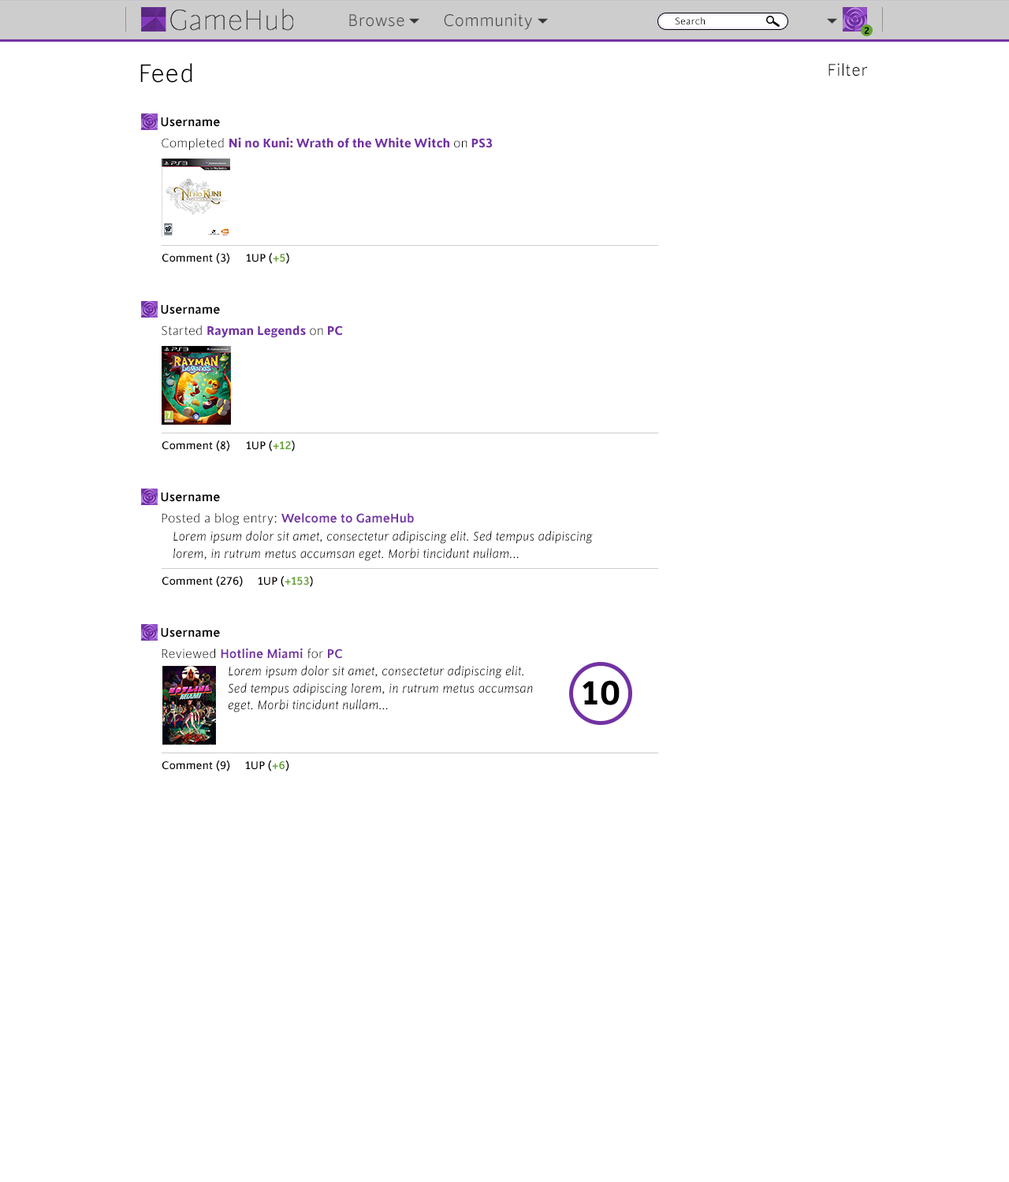
<style>
.page{position:relative;width:1009px;height:1182px;background:#ffffff}
.page>*{position:absolute;margin:0}
.t1{font:18.9px "CintaLight";color:#464646}
.t2{font:11px "CintaBook";color:#000000}
.t3{font:11px "CintaRegular-Bold";color:#000000}
.t4{font:28.4px "CintaLight";color:#000000}
.t5{font:18.9px "CintaLight";color:#000000}
.t6{font:14.2px "CintaSemibold";color:#000000}
.t7{font:14.2px "CintaRegular-Bold";color:#7332a4}
.t8{font:14.2px "CintaLight";color:#000000}
.t9{font:12.6px "CintaMedium";color:#000000}
.t10{font:12.6px "CintaSemibold";color:#64a432}
.t11{font:14.2px "CintaSemibold";color:#7332a4}
.t12{font:14.2px "CintaLight-Italic";color:#000000}
.t13{font:37.8px "CintaRegular-Bold";color:#000000}
</style>
<div class="page">
<p class="t1" style="left:349px;top:14px;width:55px;height:13px">Browse</p>
<p class="t1" style="left:444px;top:13px;width:88px;height:17px">Community</p>
<p class="t2" style="left:675px;top:17px;width:30px;height:8px">Search</p>
<p class="t3" style="left:864px;top:27px;width:5px;height:7px">2</p>
<p class="t4" style="left:140px;top:63px;width:52px;height:20px">Feed</p>
<p class="t5" style="left:828px;top:63px;width:39px;height:13px">Filter</p>
<p class="t6" style="left:161px;top:117px;width:59px;height:10px">Username</p>
<p class="t7" style="left:162px;top:137px;width:331px;height:14px"><span class="t8">Completed </span>Ni no Kuni: Wrath of the White Witch <span class="t8">on</span> PS3</p>
<p class="t9" style="left:162px;top:252px;width:67px;height:12px">Comment (3)</p>
<p class="t9" style="left:246px;top:252px;width:43px;height:12px">1UP (<span class="t10">+5</span>)</p>
<p class="t6" style="left:161px;top:305px;width:59px;height:9px">Username</p>
<p class="t7" style="left:162px;top:325px;width:181px;height:13px"><span class="t8">Started </span>Rayman Legends <span class="t8">on</span> PC</p>
<p class="t9" style="left:162px;top:440px;width:67px;height:12px">Comment (8)</p>
<p class="t9" style="left:246px;top:440px;width:49px;height:12px">1UP (<span class="t10">+12</span>)</p>
<p class="t6" style="left:161px;top:493px;width:59px;height:9px">Username</p>
<p class="t8" style="left:162px;top:513px;width:252px;height:13px">Posted a blog entry: <span class="t11">Welcome to GameHub</span></p>
<p class="t12" style="left:173px;top:530px;width:420px;height:31px">Lorem ipsum dolor sit amet, consectetur adipiscing elit. Sed tempus adipiscing<br>lorem, in rutrum metus accumsan eget. Morbi tincidunt nullam...</p>
<p class="t9" style="left:162px;top:575px;width:81px;height:12px">Comment (276)</p>
<p class="t9" style="left:258px;top:575px;width:55px;height:12px">1UP (<span class="t10">+153</span>)</p>
<p class="t6" style="left:161px;top:628px;width:59px;height:10px">Username</p>
<p class="t11" style="left:162px;top:648px;width:181px;height:11px"><span class="t8">Reviewed </span>Hotline Miami<span class="t8"> for </span>PC</p>
<p class="t12" style="left:228px;top:665px;width:305px;height:47px">Lorem ipsum dolor sit amet, consectetur adipiscing elit.<br>Sed tempus adipiscing lorem, in rutrum metus accumsan<br>eget. Morbi tincidunt nullam...</p>
<p class="t13" style="left:582px;top:680px;width:37px;height:25px">10</p>
<p class="t9" style="left:162px;top:760px;width:68px;height:12px">Comment (9)</p>
<p class="t9" style="left:245px;top:760px;width:44px;height:12px">1UP (<span class="t10">+6</span>)</p>
</div>
